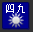
<style>
.page{position:relative;width:33px;height:32px;background:#000090}
.page>*{position:absolute;margin:0}
.t1{font:10.4px "SimSun";color:#ffffff}
</style>
<div class="page">
<p class="t1" style="left:6px;top:4px;width:19px;height:9px">四九</p>
</div>
